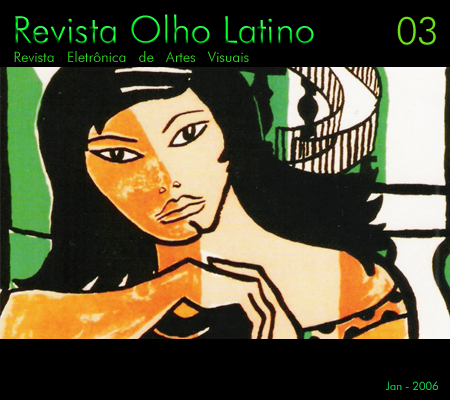
<style>
.page{position:relative;width:450px;height:400px;background:#000000}
.page>*{position:absolute;margin:0}
.t1{font:37.5px "FuturaBT-Light"}
.t2{font:37.5px "FuturaBT-Light";color:#6dde1a}
.t3{font:14.4px "FuturaBT-Light";color:#30df23}
.t4{font:11.4px "FuturaBT-Light";color:#11b748}
</style>
<div class="page">
<p class="t1" style="left:15px;top:14px;width:299px;height:30px">Revista Olho Latino</p>
<p class="t2" style="left:397px;top:16px;width:39px;height:29px">03</p>
<p class="t3" style="left:14px;top:51px;width:235px;height:11px">Revista   Eletrônica   de   Artes   Visuais</p>
<p class="t4" style="left:385px;top:381px;width:53px;height:9px">Jan - 2006</p>
</div>
